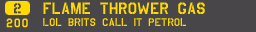
<style>
.page{position:relative;width:256px;height:32px;background:#484648}
.page>*{position:absolute;margin:0}
.t1{font:14px "USAAF_Serial_Stencil";letter-spacing:0.1em;color:#484648}
.t2{font:16px "USAAF_Stencil";letter-spacing:0.04em;color:#ffd900}
.t3{font:12px "USAAF_Serial_Stencil";letter-spacing:0.1em;color:#ffd900}
.t4{font:11px "USAAF_Stencil";letter-spacing:0.04em;color:#ffd900}
</style>
<div class="page">
<p class="t1" style="left:14px;top:3px;width:7px;height:11px">2</p>
<p class="t2" style="left:43px;top:2px;width:162px;height:12px">FLAME THROWER GAS</p>
<p class="t3" style="left:6px;top:18px;width:22px;height:10px">200</p>
<p class="t4" style="left:43px;top:18px;width:143px;height:8px">LOL BRITS CALL IT PETROL</p>
</div>
